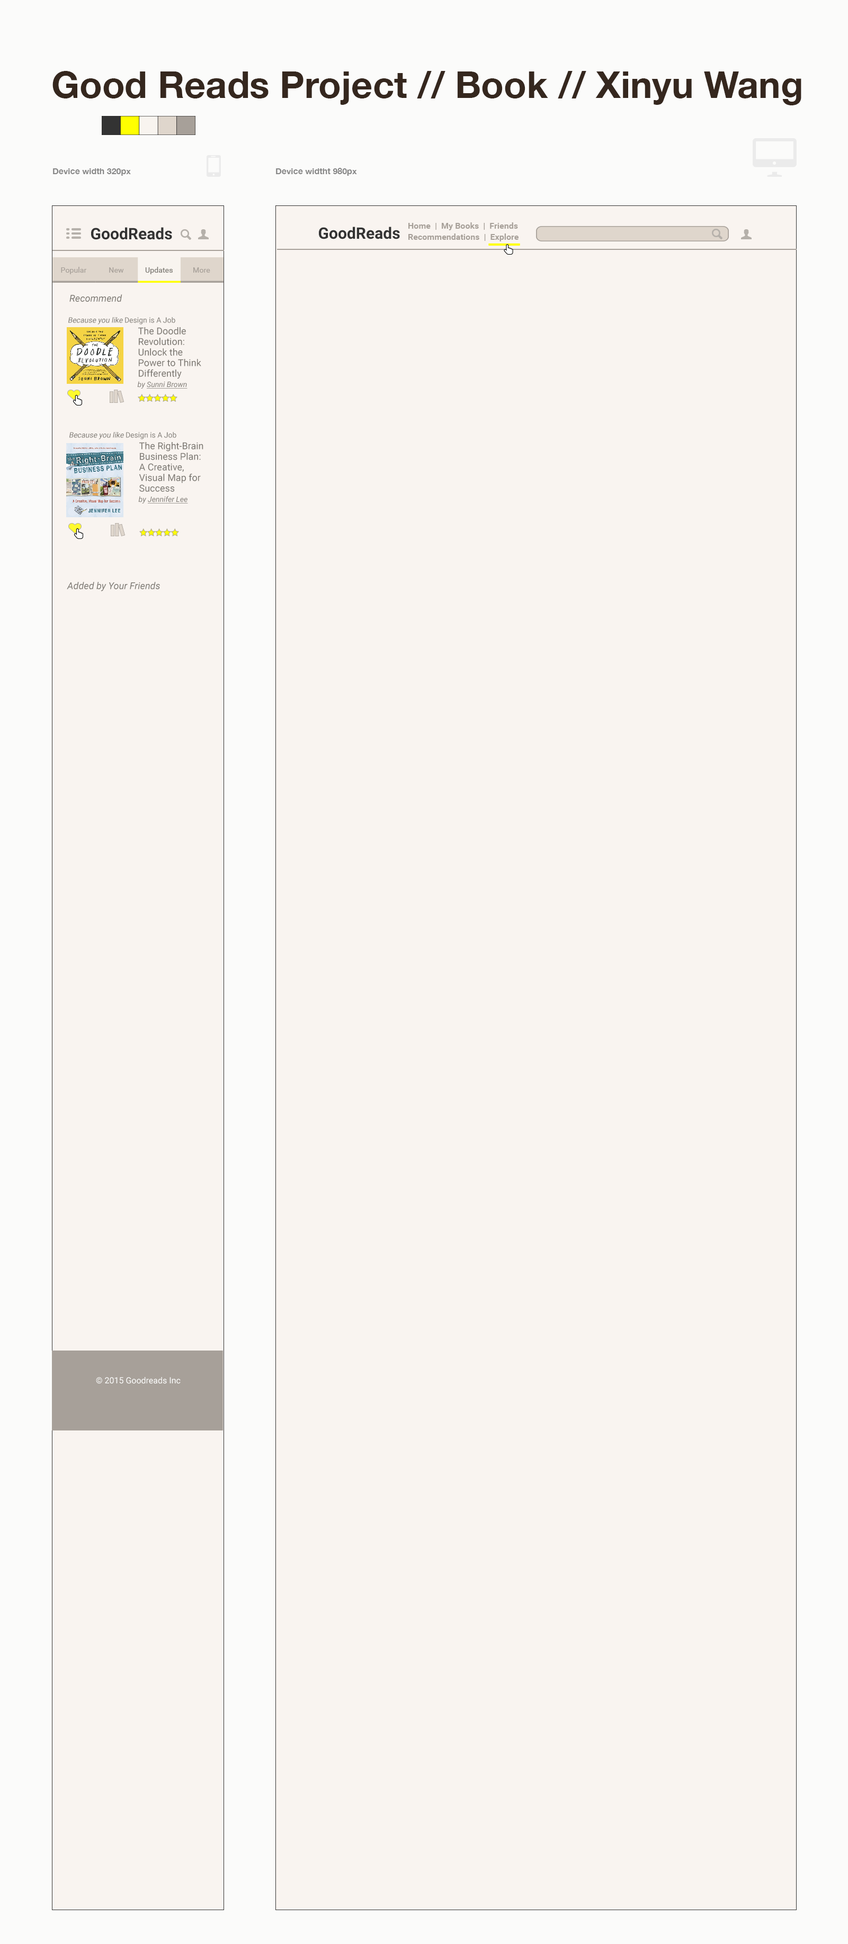
<style>
.page{position:relative;width:848px;height:1944px;background:#f9f4f0}
.page>*{position:absolute;margin:0}
.t1{font:37.1px "HelveticaNeue-Bold";color:#35271e}
.t2{font:8.5px "HelveticaNeue-Bold";color:#878787}
.t3{font:15.9px "Roboto-Bold";color:#333333}
.t4{font:9.5px "Roboto-Italic";color:#7d7973}
.t5{font:7.4px "Roboto-Regular";color:#7d7973;font-style:italic}
.t6{font:7.4px "Roboto-Regular";color:#7d7973}
.t7{font:9.5px/10.6px "Roboto-Regular";color:#7d7973}
.t8{font:7.4px "Roboto-Italic";color:#7d7973;text-decoration:underline}
.t9{font:7.4px "Roboto-Italic";color:#7d7973}
.t10{font:8.5px "Roboto-Regular";color:#fcfcfb}
</style>
<div class="page">
<p class="t1" style="left:52px;top:71px;width:749px;height:34px">Good Reads Project // Book // Xinyu Wang</p>
<p class="t2" style="left:53px;top:168px;width:78px;height:8px">Device width 320px</p>
<p class="t2" style="left:276px;top:168px;width:81px;height:8px">Device widtht 980px</p>
<p class="t3" style="left:91px;top:227px;width:81px;height:13px">GoodReads</p>
<p class="t3" style="left:319px;top:227px;width:81px;height:12px">GoodReads</p>
<p class="t4" style="left:69px;top:294px;width:53px;height:8px">Recommend</p>
<p class="t5" style="left:68px;top:317px;width:107px;height:8px">Because you like<span class="t6"> Design is A Job</span></p>
<p class="t7" style="left:138px;top:327px;width:63px;height:52px">The Doodle <br>Revolution: <br>Unlock the <br>Power to Think <br>Differently</p>
<p class="t8" style="left:137px;top:381px;width:50px;height:8px"><span class="t9">by </span>Sunni Brown</p>
<p class="t5" style="left:69px;top:432px;width:107px;height:7px">Because you like<span class="t6"> Design is A Job</span></p>
<p class="t7" style="left:139px;top:442px;width:64px;height:50px">The Right-Brain <br>Business Plan: <br>A Creative, <br>Visual Map for <br>Success</p>
<p class="t8" style="left:138px;top:496px;width:50px;height:7px"><span class="t9">by </span>Jennifer Lee</p>
<p class="t4" style="left:67px;top:582px;width:93px;height:9px">Added by Your Friends</p>
<p class="t10" style="left:96px;top:1377px;width:85px;height:7px">© 2015 Goodreads Inc</p>
</div>
